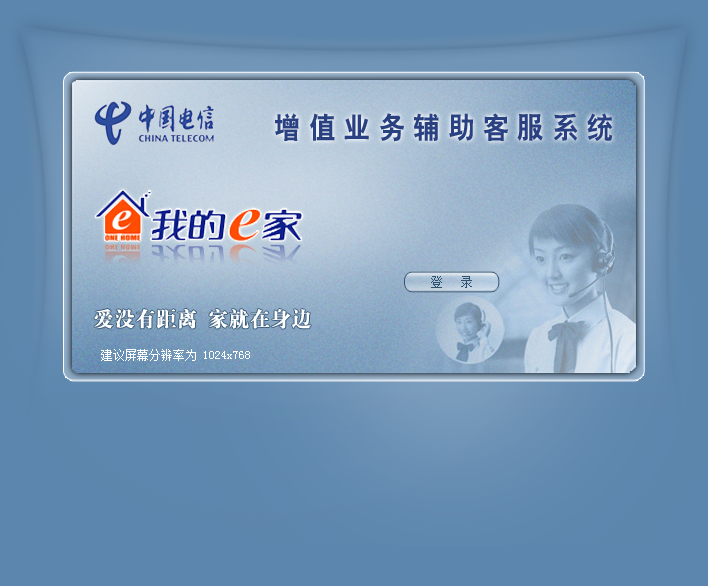
<style>
.page{position:relative;width:708px;height:586px}
.page>*{position:absolute;margin:0}
.t1{font:29.5px "HYb2gj";letter-spacing:0.3em;color:#294081;scale:0.9 1}
.t2{font:12px "SimSun";color:#30516f}
.t3{font:20.8px "HYa9gj";color:#ffffff}
.t4{font:12px "SimSun";color:#ffffff}
</style>
<div class="page">
<p class="t1" style="left:275px;top:113px;width:338px;height:29px">增值业务辅助客服系统</p>
<p class="t2" style="left:431px;top:276px;width:41px;height:12px">登   录</p>
<p class="t3" style="left:94px;top:309px;width:217px;height:20px">爱没有距离 家就在身边</p>
<p class="t4" style="left:101px;top:349px;width:149px;height:12px">建议屏幕分辨率为 1024x768</p>
</div>
